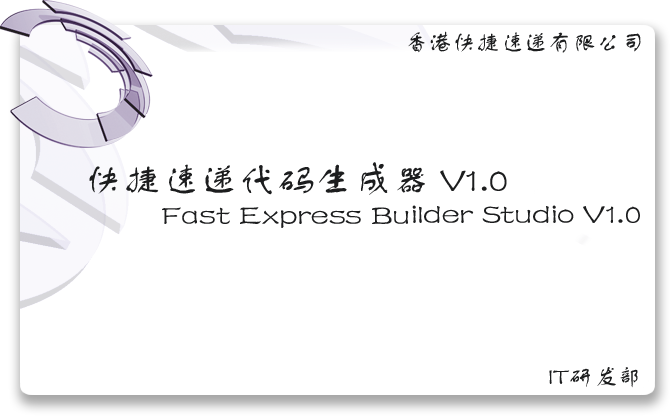
<style>
.page{position:relative;width:670px;height:416px;background:#ffffff}
.page>*{position:absolute;margin:0}
.t1{font:24px "FZSTK--GBK1-0";color:#1c1d1e}
.t2{font:36px "FZSTK--GBK1-0";color:#1c1d1e;scale:1.07 1}
.t3{font:29.6px "FZSTK--GBK1-0";color:#1c1d1e;scale:1.1 1}
</style>
<div class="page">
<p class="t1" style="left:408px;top:31px;width:233px;height:22px">香港快捷速递有限公司</p>
<p class="t2" style="left:89px;top:162px;width:418px;height:33px">快捷速递代码生成器 V1.0</p>
<p class="t3" style="left:162px;top:205px;width:478px;height:23px">Fast Express Builder Studio V1.0</p>
<p class="t1" style="left:549px;top:367px;width:89px;height:21px">IT研发部</p>
</div>
